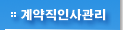
<style>
.page{position:relative;width:123px;height:30px}
.page>*{position:absolute;margin:0}
.t1{font:12px "H2gtrE";color:#ffffff;font-weight:bold}
</style>
<div class="page">
<p class="t1" style="left:20px;top:9px;width:86px;height:12px">계약직인사관리</p>
</div>
